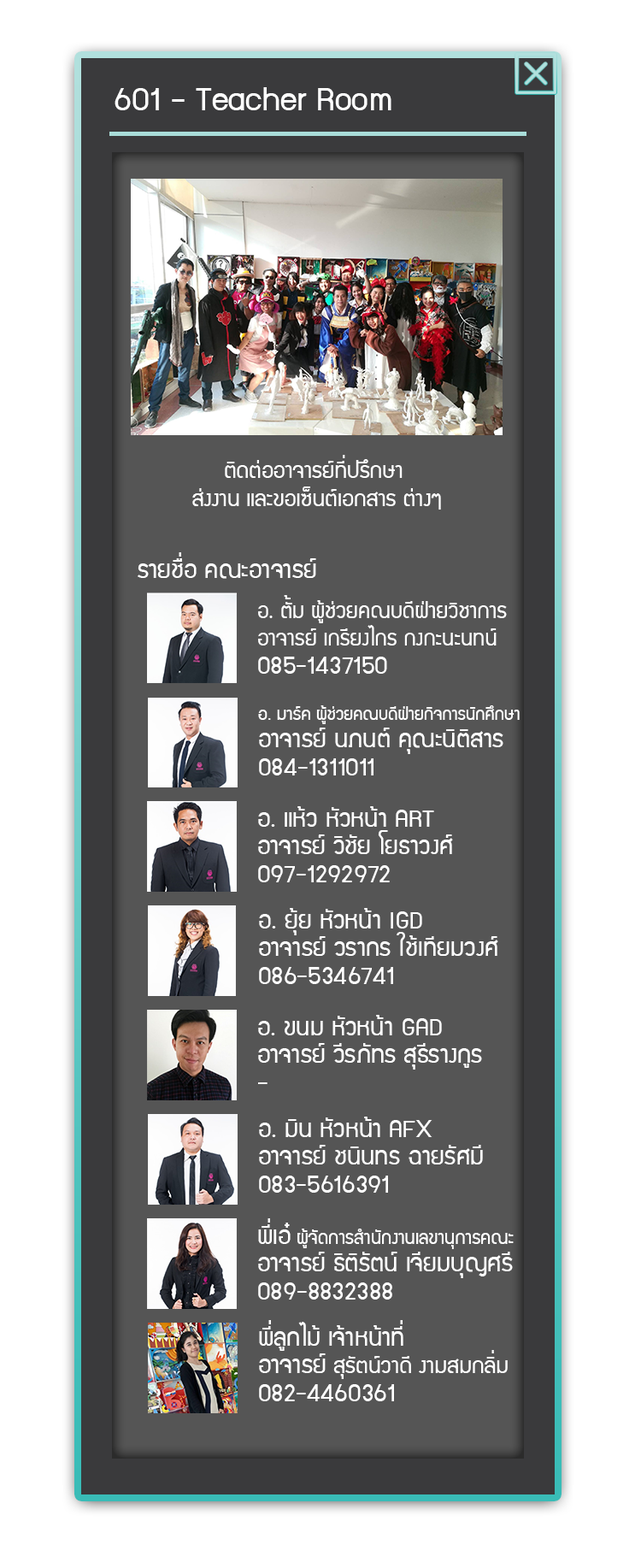
<style>
.page{position:relative;width:641px;height:1568px;background:#ffffff}
.page>*{position:absolute;margin:0}
.t1{font:36.9px "supermarket";color:#ffffff}
.t2{font:24.6px/28.6px "supermarket";color:#ffffff}
.t3{font:27.4px "supermarket";color:#ffffff}
.t4{font:23.9px/27.6px "supermarket";color:#ffffff}
.t5{font:27.4px/27.6px "supermarket";color:#ffffff}
.t6{font:19.7px/27.6px "supermarket";color:#ffffff}
.t7{font:18.8px/27.6px "supermarket";color:#ffffff}
.t8{font:20.5px/27.6px "supermarket";color:#ffffff}
.t9{font:24.8px/27.6px "supermarket";color:#ffffff}
</style>
<div class="page">
<p class="t1" style="left:115px;top:87px;width:277px;height:23px">601 - Teacher Room</p>
<p class="t2" style="left:192px;top:455px;width:249px;height:55px;text-align:center">ติดต่ออาจารย์ที่ปรึกษา <br>ส่งงาน และขอเซ็นต์เอกสาร ต่างๆ</p>
<p class="t3" style="left:138px;top:552px;width:178px;height:27px">รายชื่อ คณะอาจารย์</p>
<p class="t4" style="left:258px;top:595px;width:249px;height:79px">อ. ตั้ม ผู้ช่วยคณบดีฝ่ายวิชาการ<br>อาจารย์ เกรียงไกร กงกะนะนทน์<br><span class="t5">085-1437150</span></p>
<p class="t5" style="left:258px;top:705px;width:262px;height:70px"><span class="t6">อ. มาร์ค</span><span class="t7"> ผู้ช่วยคณบดีฝ่ายกิจการนักศึกษา<br></span>อาจารย์ นภนต์ คุณะนิติสาร<br>084-1311011</p>
<p class="t5" style="left:258px;top:806px;width:195px;height:76px">อ. แห้ว หัวหน้า ART<br>อาจารย์ วิชัย โยธาวงศ์<br>097-1292972</p>
<p class="t5" style="left:259px;top:908px;width:239px;height:76px">อ. ยุ้ย หัวหน้า IGD<br>อาจารย์ วรากร ใช้เทียมวงศ์<br>086-5346741</p>
<p class="t5" style="left:258px;top:1015px;width:224px;height:69px">อ. ขนม หัวหน้า GAD<br>อาจารย์ วีรภัทร สุธีรางกูร<br>-</p>
<p class="t5" style="left:259px;top:1117px;width:224px;height:76px">อ. มิน หัวหน้า AFX<br>อาจารย์ ชนินทร ฉายรัศมี<br>083-5616391</p>
<p class="t5" style="left:258px;top:1218px;width:256px;height:82px">พี่เอ๋ <span class="t8">ผู้จัดการสำนักงานเลขานุการคณะ<br></span>อาจารย์ ธิติรัตน์ เจียมบุญศรี<br>089-8832388</p>
<p class="t5" style="left:259px;top:1320px;width:249px;height:81px">พี่ลูกไม้ เจ้าหน้าที่<br>อาจารย์ <span class="t9">สุรัตน์วาดี งามสมกลิ่ม<br></span>082-4460361</p>
</div>
